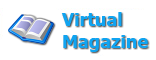
<style>
.page{position:relative;width:156px;height:60px;background:#ffffff}
.page>*{position:absolute;margin:0}
.t1{font:18px "Tahoma-Bold";color:#10a4f1}
</style>
<div class="page">
<p class="t1" style="left:61px;top:12px;width:87px;height:40px">Virtual<br>Magazine</p>
</div>
